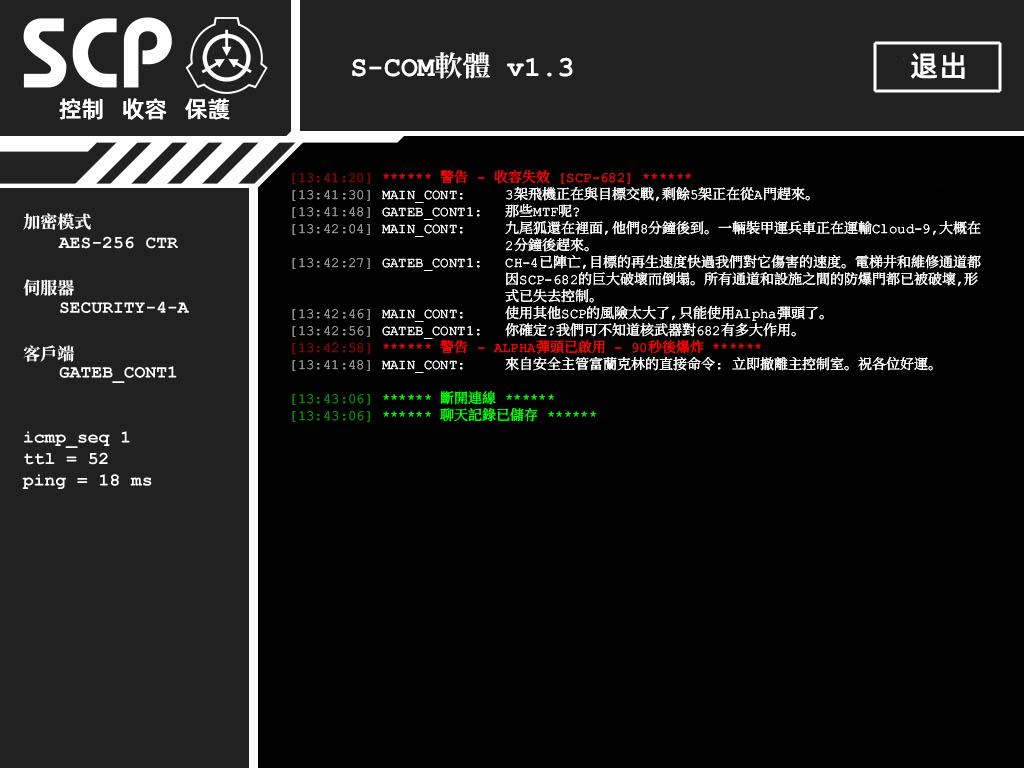
<style>
.page{position:relative;width:1024px;height:768px;background:#010101}
.page>*{position:absolute;margin:0}
.t1{font:28px "ContainmentBreach-Bold";color:#ffffff}
.t2{font:29px "AlibabaPuHuiTiM";color:#ffffff}
.t3{font:23px "AlibabaPuHuiTiM";color:#ffffff}
.t4{font:14px/17px "ContainmentBreach-Regular";color:#ffffff}
.t5{font:14px/17px "ContainmentBreach-Regular";color:#960000}
.t6{font:14px/17px "ContainmentBreach-Regular";color:#ff0000}
.t7{font:14px/17px "ContainmentBreach-Regular";color:#969696}
.t8{font:14px/17px "ContainmentBreach-Regular";color:#009600}
.t9{font:14px/17px "ContainmentBreach-Regular";color:#00ff00}
.t10{font:17px/16.5px "ContainmentBreach-Bold";color:#ffffff}
</style>
<div class="page">
<p class="t1" style="left:352px;top:52px;width:221px;height:27px">S-COM軟體 v1.3</p>
<p class="t2" style="left:911px;top:52px;width:54px;height:27px">退出</p>
<p class="t3" style="left:59px;top:98px;width:171px;height:22px">控制   收容   保護</p>
<p class="t4" style="left:292px;top:170px;width:689px;height:252px"><span class="t5">[13：41:20]</span><span class="t6"> ****** 警告 - 收容失效 【SCP-682】 ******<br></span><span class="t7">【13:41:30】</span> MAIN_CONT:  3架飛機正在與目標交戰，剩餘5架正在從A門趕來。<br><span class="t7">【13:41:48】</span> GATEB_CONT1: 那些MTF呢？<br><span class="t7">【13:42:04】</span> MAIN_CONT:  九尾狐還在裡面，他們8分鐘後到。一輛裝甲運兵車正在運輸Cloud-9，大概在<br>      2分鐘後趕來。<br><span class="t7">【13:42:27】</span> GATEB_CONT1: CH-4已陣亡，目標的再生速度快過我們對它傷害的速度。電梯井和維修通道都<br>      因SCP-682的巨大破壞而倒塌。所有通道和設施之間的防爆門都已被破壞，形<br>      式已失去控制。<br><span class="t7">【13:42:46】</span> MAIN_CONT：  使用其他SCP的風險太大了，只能使用Alpha彈頭了。<br><span class="t7">【13:42:56】</span> GATEB_CONT1: 你確定？我們可不知道核武器對682有多大作用。<br><span class="t5">[13:42:58]</span><span class="t6"> ****** 警告 - ALPHA彈頭已啟用 - 90秒後爆炸 ******<br></span><span class="t7">【13:41:48】</span> MAIN_CONT:  來自安全主管富蘭克林的直接命令： 立即撤離主控制室。祝各位好運。<br><br><span class="t8">[13：43:06]</span><span class="t9"> ****** 斷開連線 ******<br></span><span class="t8">[13:43:06]</span><span class="t9"> ****** 聊天記錄已儲存 ******</span></p>
<p class="t10" style="left:23px;top:213px;width:68px;height:149px">加密模式<br><br><br><br>伺服器<br><br><br><br>客戶端</p>
</div>
